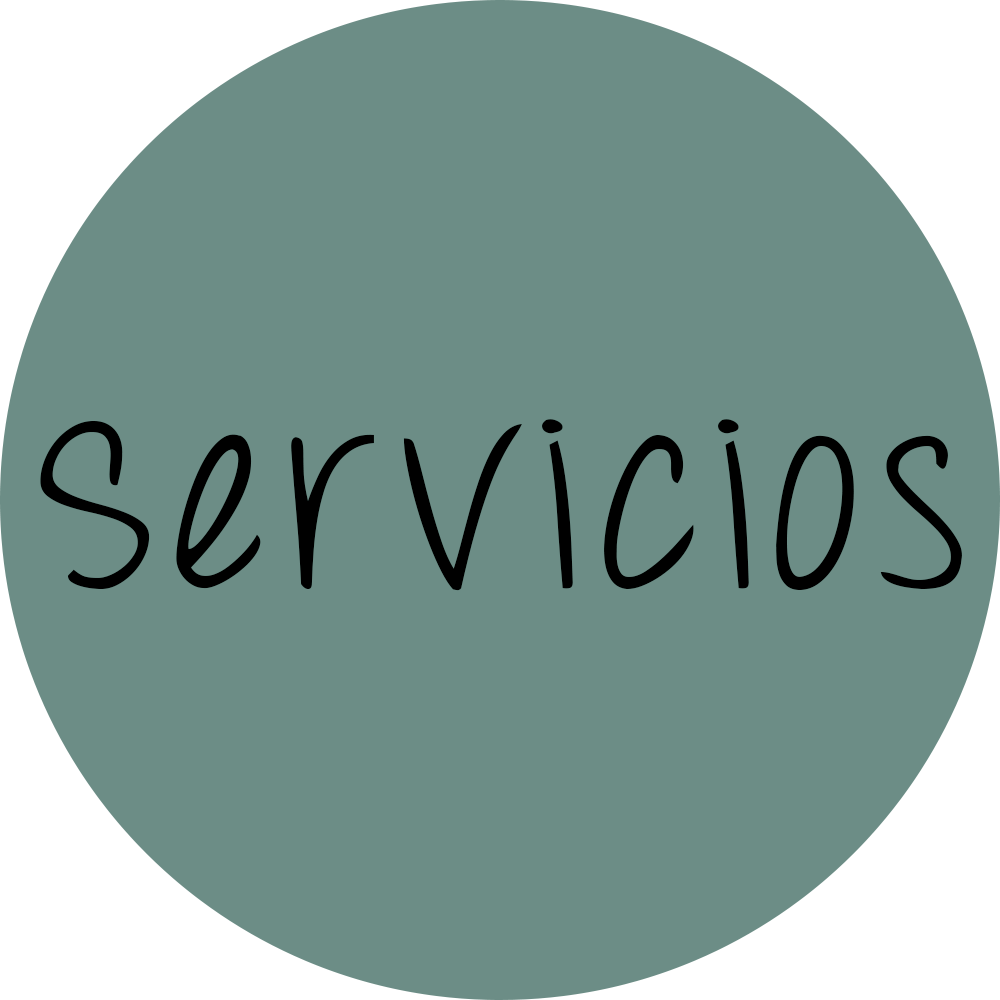
<style>
.page{position:relative;width:1000px;height:1000px;background:#6c8d86}
.page>*{position:absolute;margin:0}
.t1{font:250px "ThrowMyHandsUpintheAir";letter-spacing:0.075em;color:#000000}
</style>
<div class="page">
<p class="t1" style="left:40px;top:419px;width:922px;height:172px">Servicios</p>
</div>
